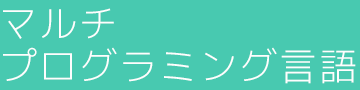
<style>
.page{position:relative;width:360px;height:90px;background:#48c9b0}
.page>*{position:absolute;margin:0}
.t1{font:38px/43px "mplus-1c-light";letter-spacing:0.05em;color:#fefefe}
</style>
<div class="page">
<p class="t1" style="left:3px;top:8px;width:353px;height:76px">マルチ<br>プログラミング言語</p>
</div>
